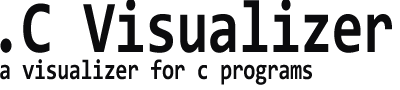
<style>
.page{position:relative;width:400px;height:90px;background:#ffffff}
.page>*{position:absolute;margin:0}
.t1{font:74.9px "Consolas-Bold";letter-spacing:-0.02em;color:#0b0b0d;scale:0.78 1}
.t2{font:28.1px "Consolas-Bold";letter-spacing:-0.02em;color:#0b0b0d;scale:0.78 1}
</style>
<div class="page">
<p class="t1" style="left:0px;top:0px;width:392px;height:53px">.C Visualizer</p>
<p class="t2" style="left:0px;top:59px;width:312px;height:26px">a visualizer for c programs</p>
</div>
